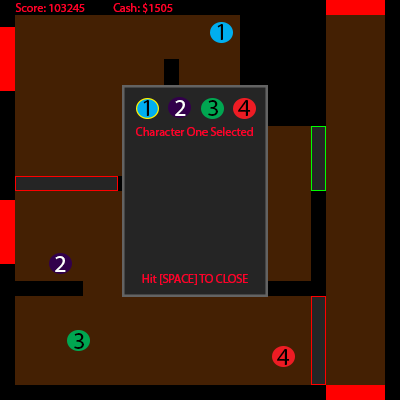
<style>
.page{position:relative;width:400px;height:400px;background:#442003}
.page>*{position:absolute;margin:0}
.t1{font:12px "MyriadPro-Regular";color:#ff002a}
.t2{font:24px "MyriadPro-Regular";color:#000000}
.t3{font:24px "MyriadPro-Regular";color:#ffffff}
</style>
<div class="page">
<p class="t1" style="left:15px;top:2px;width:158px;height:12px">Score: 103245           Cash: $1505</p>
<p class="t2" style="left:217px;top:24px;width:6px;height:16px">1</p>
<p class="t2" style="left:143px;top:100px;width:6px;height:16px">1</p>
<p class="t3" style="left:175px;top:100px;width:11px;height:16px">2</p>
<p class="t2" style="left:208px;top:100px;width:10px;height:16px">3</p>
<p class="t2" style="left:238px;top:100px;width:13px;height:16px">4</p>
<p class="t1" style="left:136px;top:127px;width:117px;height:9px">Character One Selected</p>
<p class="t3" style="left:55px;top:256px;width:11px;height:16px">2</p>
<p class="t1" style="left:142px;top:274px;width:106px;height:11px">Hit [SPACE] TO CLOSE</p>
<p class="t2" style="left:74px;top:333px;width:10px;height:16px">3</p>
<p class="t2" style="left:277px;top:349px;width:13px;height:16px">4</p>
</div>
